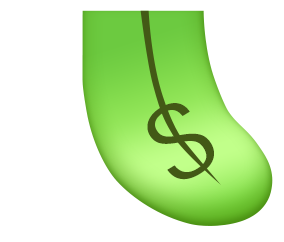
<style>
.page{position:relative;width:284px;height:242px;background:#ffffff}
.page>*{position:absolute;margin:0}
.t1{font:110px "AcuminConcept-CondensedLight";letter-spacing:0.025em;color:#435916;text-transform:uppercase;scale:1.3 1}
</style>
<div class="page">
<p class="t1" style="left:147px;top:103px;width:67px;height:77px;rotate:-31deg">S</p>
</div>
